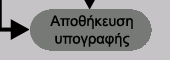
<style>
.page{position:relative;width:170px;height:60px;background:#c6c3c6}
.page>*{position:absolute;margin:0}
.t1{font:14.7px "ArialMT";color:#000000}
</style>
<div class="page">
<p class="t1" style="left:50px;top:15px;width:83px;height:32px;text-align:center">Αποθήκευση<br>υπογραφής</p>
</div>
